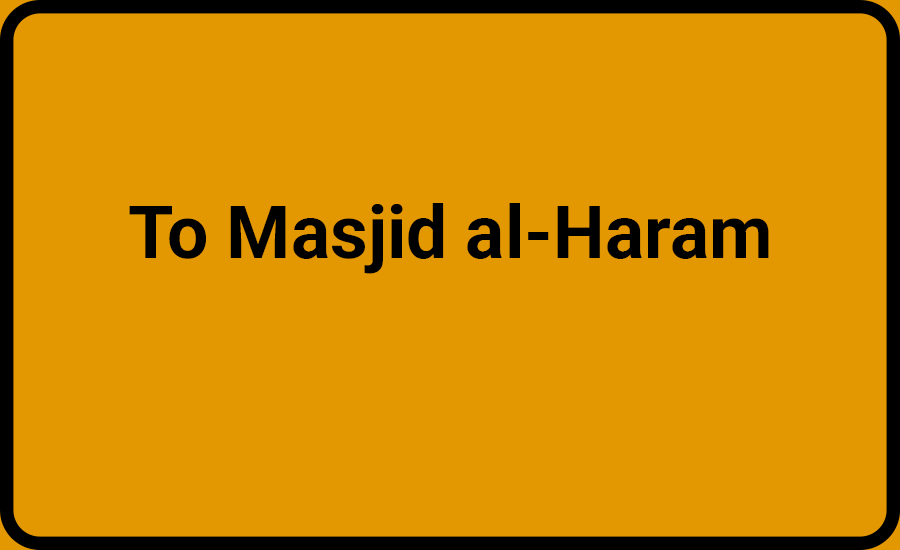
<style>
.page{position:relative;width:900px;height:550px;background:#e39700}
.page>*{position:absolute;margin:0}
.t1{font:73.3px "Roboto-Bold";color:#000000}
</style>
<div class="page">
<p class="t1" style="left:129px;top:203px;width:640px;height:71px">To Masjid al-Haram</p>
</div>
